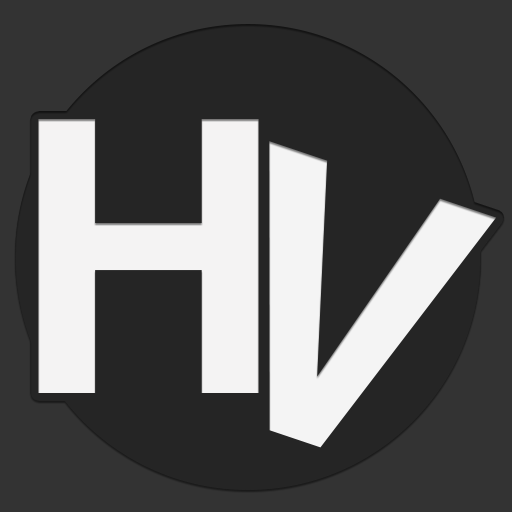
<style>
.page{position:relative;width:512px;height:512px;background:#252525}
.page>*{position:absolute;margin:0}
.t1{font:380.6px "Helvetica-Bold";color:#fffefe}
.t2{font:380.6px "Helvetica-Bold";color:#ffffff}
</style>
<div class="page">
<p class="t1" style="left:38px;top:119px;width:221px;height:274px">H</p>
<p class="t2" style="left:269px;top:141px;width:228px;height:307px;rotate:19deg">V</p>
</div>
